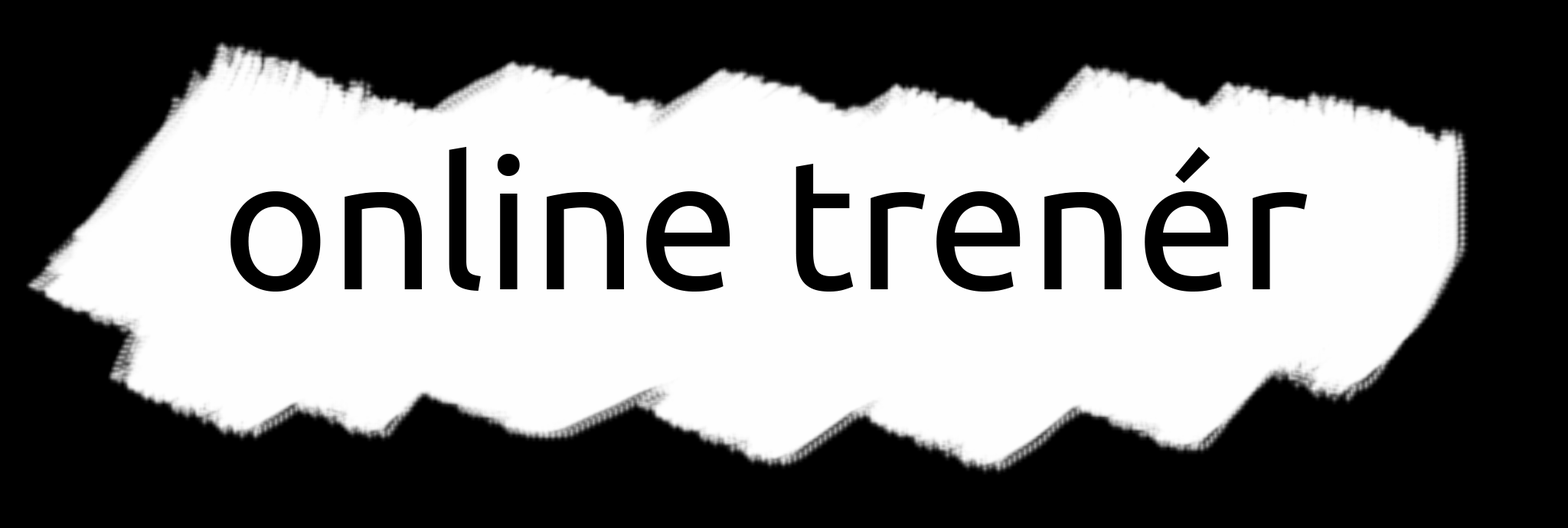
<style>
.page{position:relative;width:1568px;height:528px;background:#000000}
.page>*{position:absolute;margin:0}
.t1{font:183.7px "Ubuntu-Regular";color:#000000}
</style>
<div class="page">
<p class="t1" style="left:230px;top:146px;width:1078px;height:146px">online trenér</p>
</div>
